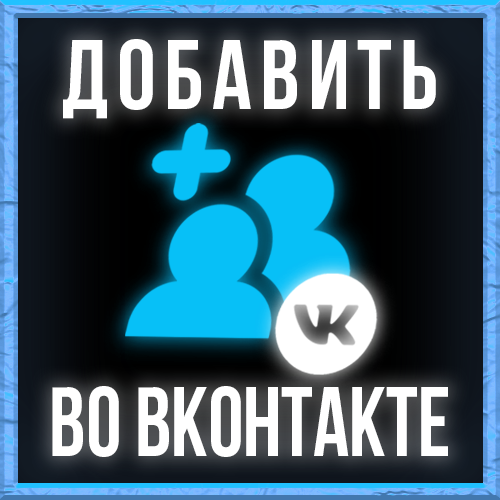
<style>
.page{position:relative;width:500px;height:500px}
.page>*{position:absolute;margin:0}
.t1{font:98px "BebasNeueBold";letter-spacing:0.08em;color:#ffffff}
.t2{font:98px "BebasNeueBold";color:#ffffff;scale:0.91 1}
</style>
<div class="page">
<p class="t1" style="left:63px;top:39px;width:373px;height:80px">добавить</p>
<p class="t2" style="left:52px;top:386px;width:396px;height:71px">во вконтакте</p>
</div>
